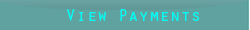
<style>
.page{position:relative;width:250px;height:30px;background:#5fa2a0}
.page>*{position:absolute;margin:0}
.t1{font:16.7px "OratorStd";color:#00fef6;scale:1.04 1}
</style>
<div class="page">
<p class="t1" style="left:67px;top:9px;width:132px;height:12px">View Payments</p>
</div>
